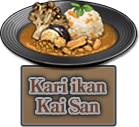
<style>
.page{position:relative;width:139px;height:127px;background:#ffffff}
.page>*{position:absolute;margin:0}
.t1{font:18px/20px "RyuminPro-ExBold";letter-spacing:-0.08em;color:#654031;font-weight:bold}
</style>
<div class="page">
<p class="t1" style="left:30px;top:78px;width:76px;height:35px;text-align:center">Kari ikan<br>Kai San</p>
</div>
